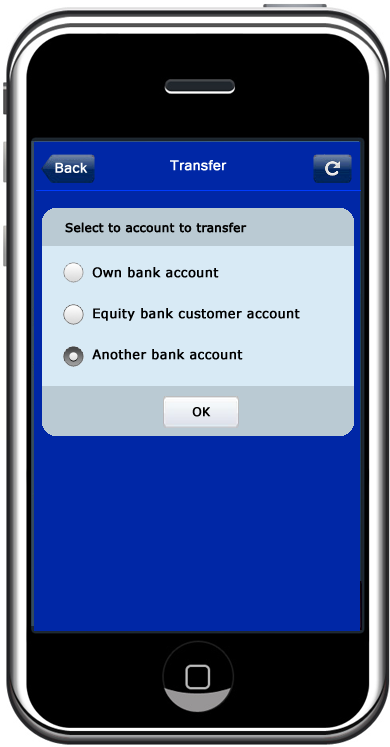
<style>
.page{position:relative;width:390px;height:747px;background:#0027a6}
.page>*{position:absolute;margin:0}
.t1{font:18px "Tunga";color:#ffffff;font-weight:bold}
.t2{font:12px "Verdana";color:#000000;font-weight:bold}
.t3{font:13px/41px "Verdana";color:#000000;font-weight:bold}
</style>
<div class="page">
<p class="t1" style="left:170px;top:160px;width:57px;height:11px">Transfer</p>
<p class="t1" style="left:55px;top:162px;width:33px;height:11px">Back</p>
<p class="t2" style="left:65px;top:222px;width:182px;height:11px">Select to account to transfer</p>
<p class="t3" style="left:92px;top:267px;width:208px;height:93px">Own bank account<br>Equity bank customer account<br>Another bank account</p>
<p class="t2" style="left:192px;top:407px;width:19px;height:10px">OK</p>
</div>
